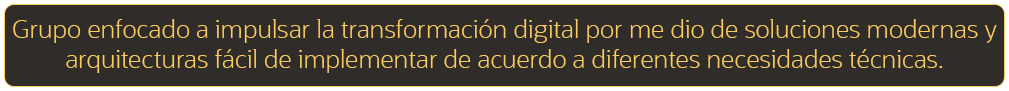
<style>
.page{position:relative;width:1009px;height:91px;background:#302c29}
.page>*{position:absolute;margin:0}
.t1{font:25px "OracleSans-Light";color:#f9cc61}
</style>
<div class="page">
<p class="t1" style="left:13px;top:19px;width:984px;height:54px;text-align:center">Grupo enfocado a impulsar la transformación digital por me dio de soluciones modernas y arquitecturas fácil de implementar de acuerdo a diferentes necesidades técnicas.</p>
</div>
